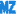
<style>
.page{position:relative;width:16px;height:16px;background:#1882d9}
.page>*{position:absolute;margin:0}
.t1{font:9.8px "CrackedCode";color:#1882d9;scale:0.72 1}
</style>
<div class="page">
<p class="t1" style="left:0px;top:0px;width:16px;height:14px">MZ</p>
</div>
